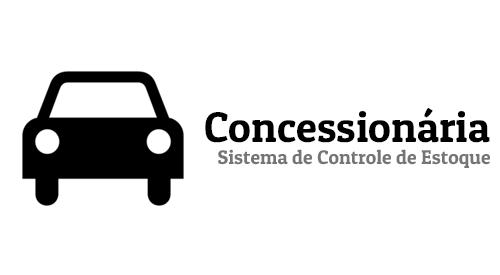
<style>
.page{position:relative;width:500px;height:275px;background:#ffffff}
.page>*{position:absolute;margin:0}
.t1{font:43px "PatuaOne-Regular";color:#000000}
.t2{font:19.9px "PatuaOne-Regular";color:#757575}
</style>
<div class="page">
<p class="t1" style="left:205px;top:107px;width:285px;height:36px">Concessionária</p>
<p class="t2" style="left:218px;top:149px;width:272px;height:19px">Sistema de Controle de Estoque</p>
</div>
